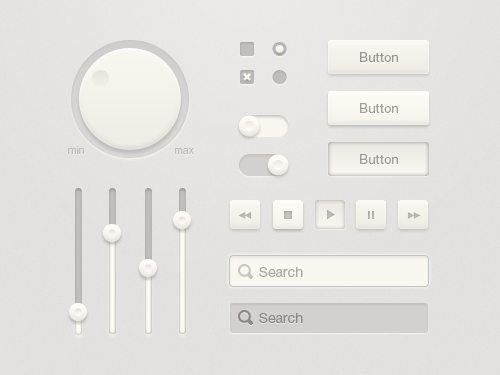
<style>
.page{position:relative;width:500px;height:375px}
.page>*{position:absolute;margin:0}
.t1{font:13px "HelveticaNeueCyr-Roman";letter-spacing:0.005em;color:#9b9591}
.t2{font:13px "HelveticaNeueCyr-Roman";letter-spacing:0.005em;color:#a39d99}
.t3{font:10px "HelveticaNeueCyr-Roman";letter-spacing:0.005em;color:#bebebf}
.t4{font:13px "HelveticaNeueCyr-Roman";letter-spacing:0.005em;color:#a19b97}
.t5{font:14px "HelveticaNeueCyr-Roman";letter-spacing:0.005em;color:#ada8a4}
.t6{font:14px "HelveticaNeueCyr-Roman";letter-spacing:0.005em;color:#8c8885}
</style>
<div class="page">
<p class="t1" style="left:360px;top:52px;width:38px;height:11px">Button</p>
<p class="t2" style="left:360px;top:103px;width:38px;height:11px">Button</p>
<p class="t3" style="left:68px;top:146px;width:16px;height:8px">min</p>
<p class="t3" style="left:175px;top:147px;width:19px;height:7px">max</p>
<p class="t4" style="left:360px;top:154px;width:38px;height:11px">Button</p>
<p class="t5" style="left:259px;top:267px;width:44px;height:10px">Search</p>
<p class="t6" style="left:259px;top:313px;width:44px;height:10px">Search</p>
</div>
